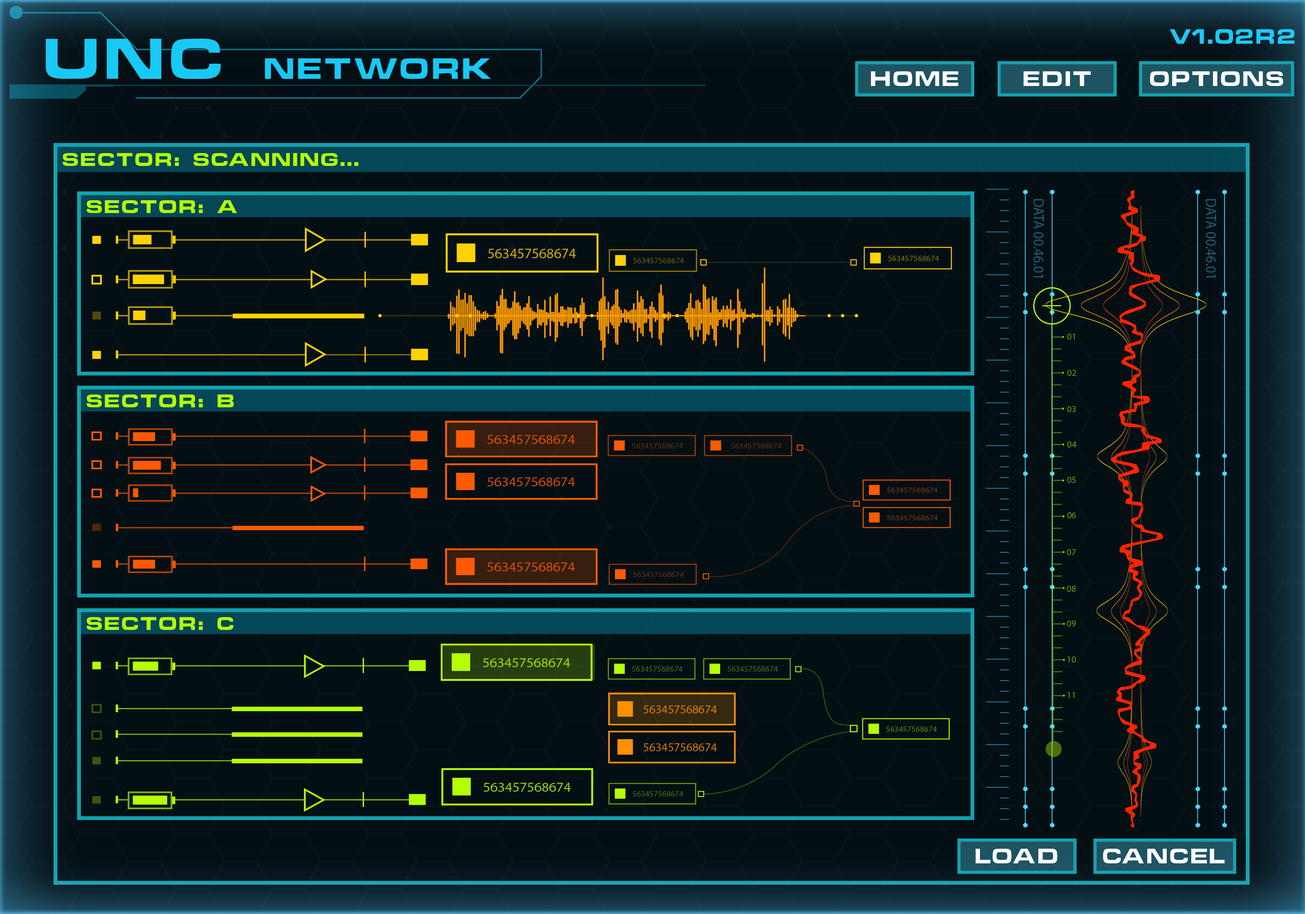
<style>
.page{position:relative;width:1305px;height:914px;background:#040f14}
.page>*{position:absolute;margin:0}
.t1{font:19.1px "ChinoCapsSSK";letter-spacing:0.12em;color:#1cc9f6}
.t2{font:26.9px "ChinoCapsSSK";letter-spacing:0.12em;color:#17c9f5}
.t3{font:52.4px "ChinoCapsSSK";letter-spacing:0.12em;color:#17c9f5}
.t4{font:19.2px "ChinoCapsSSK";letter-spacing:0.12em;color:#ffffff}
.t5{font:16.8px "ChinoCapsSSK";letter-spacing:0.12em;color:#b4ff00}
</style>
<div class="page">
<p class="t1" style="left:1169px;top:29px;width:125px;height:15px">V1.02R2</p>
<p class="t2" style="left:46px;top:39px;width:445px;height:40px"><span class="t3">UNC </span>NETWORK</p>
<p class="t4" style="left:870px;top:71px;width:88px;height:15px">HOME</p>
<p class="t4" style="left:1023px;top:71px;width:68px;height:15px">EDIT</p>
<p class="t4" style="left:1149px;top:71px;width:134px;height:15px">OPTIONS</p>
<p class="t5" style="left:63px;top:153px;width:295px;height:13px">SECTOR: SCANNING...</p>
<p class="t5" style="left:87px;top:200px;width:150px;height:13px">SECTOR: A</p>
<p class="t5" style="left:87px;top:394px;width:147px;height:13px">SECTOR: B</p>
<p class="t5" style="left:87px;top:617px;width:146px;height:13px">SECTOR: C</p>
<p class="t4" style="left:975px;top:849px;width:82px;height:14px">LOAD</p>
<p class="t4" style="left:1103px;top:849px;width:121px;height:14px">CANCEL</p>
</div>
